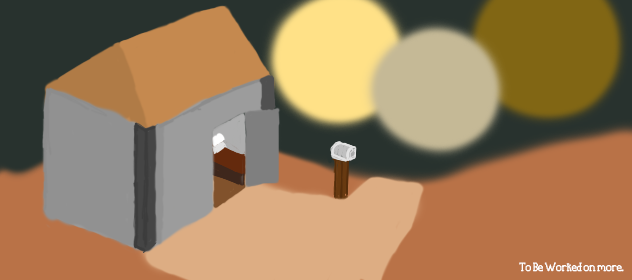
<style>
.page{position:relative;width:632px;height:280px;background:#b97247}
.page>*{position:absolute;margin:0}
.t1{font:10px "Pixserif";color:#ffffff}
</style>
<div class="page">
<p class="t1" style="left:519px;top:262px;width:105px;height:10px">To Be Worked on more.</p>
</div>
